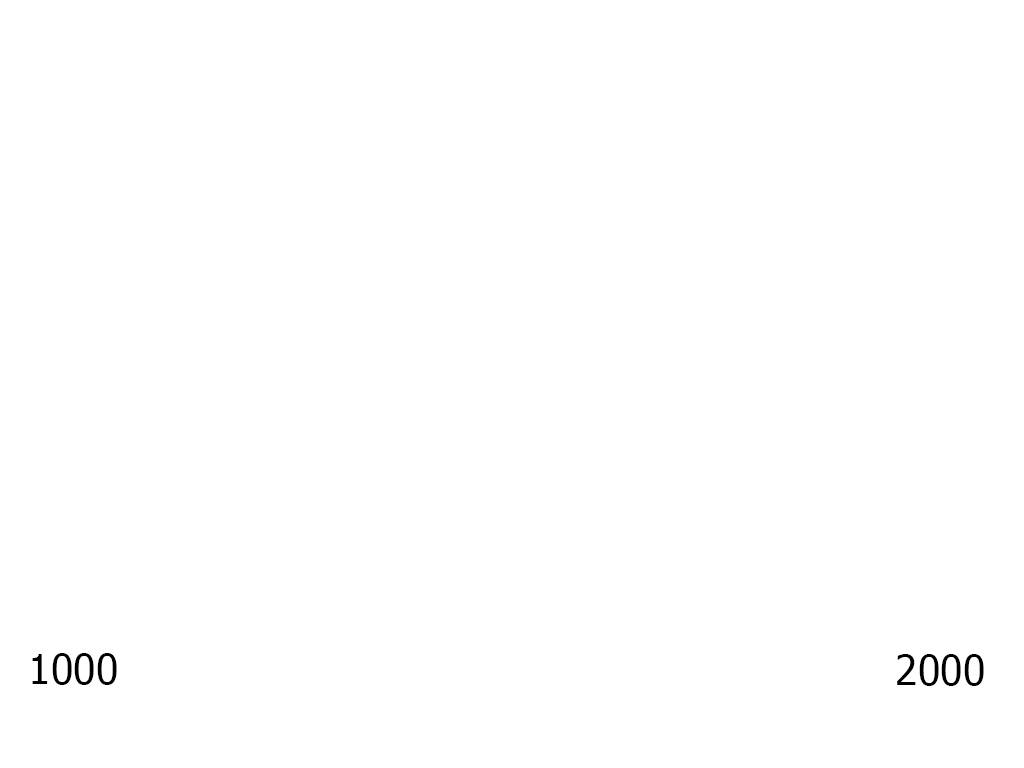
<style>
.page{position:relative;width:1024px;height:768px;background:#ffffff}
.page>*{position:absolute;margin:0}
.t1{font:40.8px "Tahoma";color:#000000}
</style>
<div class="page">
<p class="t1" style="left:32px;top:653px;width:85px;height:32px">1000</p>
<p class="t1" style="left:897px;top:654px;width:87px;height:32px">2000</p>
</div>
